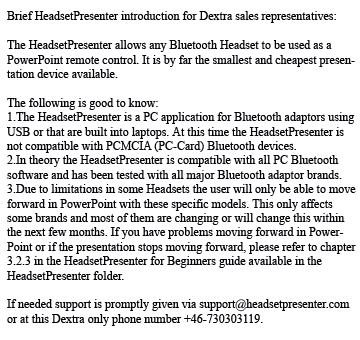
<style>
.page{position:relative;width:360px;height:340px;background:#ffffff}
.page>*{position:absolute;margin:0}
.t1{font:12px "TimesNewRomanPSMT";color:#000206}
</style>
<div class="page">
<p class="t1" style="left:7px;top:11px;width:349px;height:315px">Brief HeadsetPresenter introduction for Dextra sales representatives:<br><br>The HeadsetPresenter allows any Bluetooth Headset to be used as a PowerPoint remote control. It is by far the smallest and cheapest presentation device available.<br><br>The following is good to know:<br>1.The HeadsetPresenter is a PC application for Bluetooth adaptors using USB or that are built into laptops. At this time the HeadsetPresenter is not compatible with PCMCIA (PC-Card) Bluetooth devices.<br>2.In theory the HeadsetPresenter is compatible with all PC Bluetooth software and has been tested with all major Bluetooth adaptor brands. <br>3.Due to limitations in some Headsets the user will only be able to move forward in PowerPoint with these specific models. This only affects some brands and most of them are changing or will change this within the next few months. If you have problems moving forward in PowerPoint or if the presentation stops moving forward, please refer to chapter 3.2.3 in the HeadsetPresenter for Beginners guide available in the HeadsetPresenter folder.<br><br>If needed support is promptly given via support@headsetpresenter.com or at this Dextra only phone number +46-730303119.</p>
</div>
